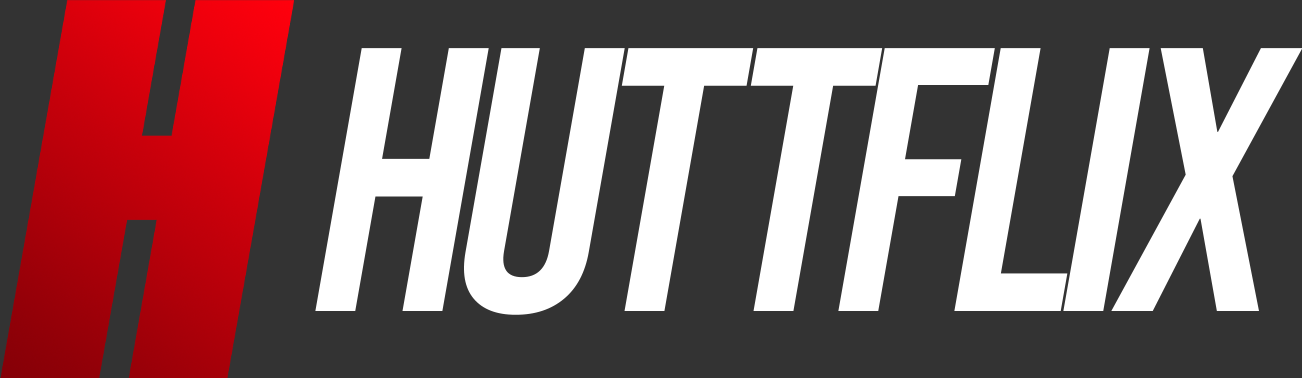
<style>
.page{position:relative;width:1302px;height:378px;background:#333333}
.page>*{position:absolute;margin:0}
.t1{font:375.5px "BebasKai";letter-spacing:-0.02em;color:#ffffff;font-style:italic}
.t2{font:375.5px "BebasKai";letter-spacing:-0.06em;color:#ffffff;font-style:italic}
.t3{font:375.5px "BebasKai";letter-spacing:-0.015em;color:#ffffff;font-style:italic}
.t4{font:375.5px "BebasKai";letter-spacing:0.005em;color:#ffffff;font-style:italic}
</style>
<div class="page">
<p class="t1" style="left:315px;top:48px;width:988px;height:267px"><span class="t2">h</span><span class="t3">u</span><span class="t4">t</span>tflix</p>
</div>
